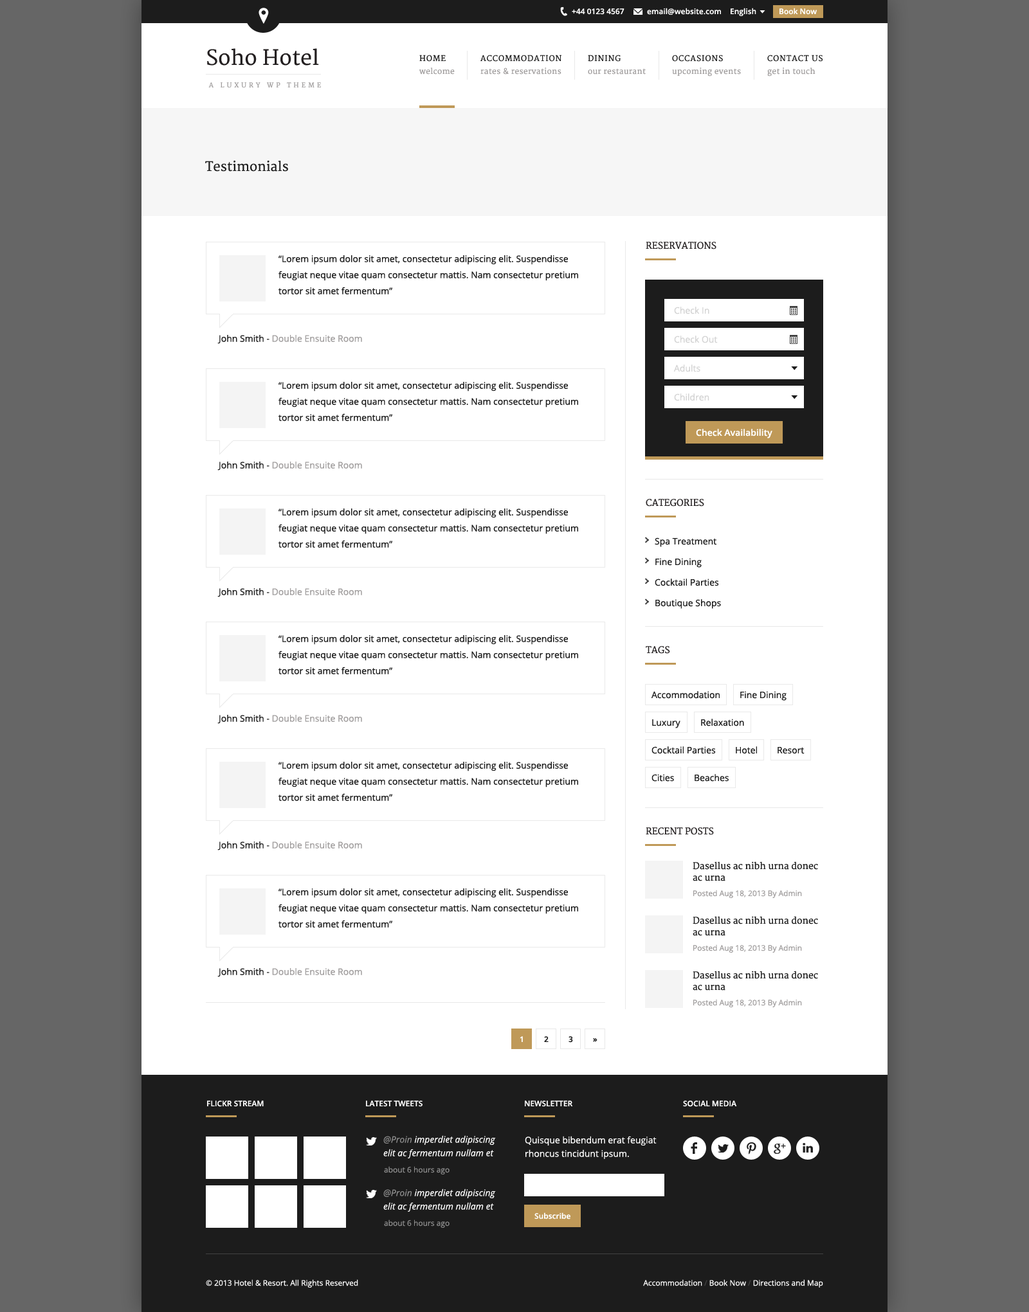
<style>
.page{position:relative;width:1029px;height:1312px;background:#ffffff}
.page>*{position:absolute;margin:0}
.t1{font:7.7px "OpenSans-Semibold";color:#ffffff}
.t2{font:20.6px "Merriweather";color:#231f20}
.t3{font:7.7px "Merriweather";letter-spacing:0.075em;color:#1c1c1c;text-transform:uppercase}
.t4{font:7.7px "Merriweather";letter-spacing:0.025em;color:#a09d9d}
.t5{font:6.4px "Merriweather";letter-spacing:0.4em;color:#a09d9d;text-transform:uppercase}
.t6{font:12.9px "Merriweather";color:#1c1c1c}
.t7{font:9px "Merriweather";color:#231f20;text-transform:uppercase}
.t8{font:9px/16.1px "OpenSans";color:#1c1c1c}
.t9{font:9px "OpenSans";color:#d3d3d3}
.t10{font:9px "OpenSans";color:#a09d9d}
.t11{font:9px "OpenSans";color:#1c1c1c}
.t12{font:9px "OpenSans-Semibold";color:#ffffff}
.t13{font:9px/11.6px "Merriweather";color:#1c1c1c}
.t14{font:7.7px "OpenSans";color:#a09d9d}
.t15{font:7.7px "OpenSans-Semibold";color:#1c1c1c}
.t16{font:7.7px "OpenSans-Semibold";color:#ffffff;text-transform:uppercase}
.t17{font:9px/13.5px "OpenSans-Italic";color:#ffffff}
.t18{font:9px/13.5px "OpenSans-Italic";color:#8b8b8b}
.t19{font:9px/13.5px "OpenSans";color:#ffffff}
.t20{font:7.7px "OpenSans";color:#8b8b8b}
.t21{font:7.7px "OpenSans";color:#ffffff}
.t22{font:7.7px "OpenSans";color:#424242}
</style>
<div class="page">
<p class="t1" style="left:572px;top:8px;width:52px;height:7px">+44 0123 4567</p>
<p class="t1" style="left:647px;top:8px;width:74px;height:7px">email@website.com</p>
<p class="t1" style="left:730px;top:8px;width:26px;height:8px">English</p>
<p class="t1" style="left:779px;top:8px;width:37px;height:7px">Book Now</p>
<p class="t2" style="left:207px;top:48px;width:112px;height:18px">Soho Hotel</p>
<p class="t3" style="left:419px;top:55px;width:27px;height:7px">Home</p>
<p class="t3" style="left:480px;top:55px;width:81px;height:7px">Accommodation</p>
<p class="t3" style="left:588px;top:55px;width:32px;height:7px">Dining</p>
<p class="t3" style="left:672px;top:55px;width:51px;height:7px">Occasions</p>
<p class="t3" style="left:767px;top:55px;width:55px;height:7px">Contact Us</p>
<p class="t4" style="left:419px;top:68px;width:36px;height:7px">welcome</p>
<p class="t4" style="left:480px;top:68px;width:81px;height:7px">rates &amp; reservations</p>
<p class="t4" style="left:588px;top:68px;width:57px;height:7px">our restaurant</p>
<p class="t4" style="left:672px;top:68px;width:69px;height:8px">upcoming events</p>
<p class="t4" style="left:767px;top:68px;width:48px;height:8px">get in touch</p>
<p class="t5" style="left:208px;top:82px;width:113px;height:6px">A Luxury WP Theme</p>
<p class="t6" style="left:205px;top:160px;width:83px;height:12px">Testimonials</p>
<p class="t7" style="left:645px;top:242px;width:71px;height:7px">Reservations</p>
<p class="t8" style="left:278px;top:255px;width:300px;height:39px">“Lorem ipsum dolor sit amet, consectetur adipiscing elit. Suspendisse feugiat neque vitae quam consectetur mattis. Nam consectetur pretium tortor sit amet fermentum”</p>
<p class="t9" style="left:674px;top:307px;width:35px;height:7px">Check In</p>
<p class="t10" style="left:217px;top:335px;width:145px;height:9px"><span class="t11">John Smith - </span>Double Ensuite Room</p>
<p class="t9" style="left:674px;top:336px;width:43px;height:7px">Check Out</p>
<p class="t9" style="left:673px;top:364px;width:27px;height:8px">Adults</p>
<p class="t8" style="left:278px;top:382px;width:300px;height:39px">“Lorem ipsum dolor sit amet, consectetur adipiscing elit. Suspendisse feugiat neque vitae quam consectetur mattis. Nam consectetur pretium tortor sit amet fermentum”</p>
<p class="t9" style="left:674px;top:393px;width:35px;height:8px">Children</p>
<p class="t12" style="left:696px;top:429px;width:76px;height:9px">Check Availability</p>
<p class="t10" style="left:217px;top:462px;width:145px;height:9px"><span class="t11">John Smith - </span>Double Ensuite Room</p>
<p class="t8" style="left:278px;top:509px;width:300px;height:39px">“Lorem ipsum dolor sit amet, consectetur adipiscing elit. Suspendisse feugiat neque vitae quam consectetur mattis. Nam consectetur pretium tortor sit amet fermentum”</p>
<p class="t7" style="left:645px;top:499px;width:59px;height:8px">Categories</p>
<p class="t11" style="left:654px;top:537px;width:62px;height:10px">Spa Treatment</p>
<p class="t11" style="left:655px;top:558px;width:46px;height:10px">Fine Dining</p>
<p class="t11" style="left:654px;top:579px;width:65px;height:7px">Cocktail Parties</p>
<p class="t10" style="left:217px;top:588px;width:145px;height:9px"><span class="t11">John Smith - </span>Double Ensuite Room</p>
<p class="t11" style="left:655px;top:599px;width:66px;height:10px">Boutique Shops</p>
<p class="t8" style="left:278px;top:635px;width:300px;height:39px">“Lorem ipsum dolor sit amet, consectetur adipiscing elit. Suspendisse feugiat neque vitae quam consectetur mattis. Nam consectetur pretium tortor sit amet fermentum”</p>
<p class="t7" style="left:645px;top:646px;width:25px;height:8px">Tags</p>
<p class="t11" style="left:651px;top:691px;width:68px;height:8px">Accommodation</p>
<p class="t11" style="left:740px;top:691px;width:46px;height:10px">Fine Dining</p>
<p class="t10" style="left:217px;top:715px;width:145px;height:9px"><span class="t11">John Smith - </span>Double Ensuite Room</p>
<p class="t11" style="left:652px;top:719px;width:28px;height:9px">Luxury</p>
<p class="t11" style="left:701px;top:719px;width:43px;height:7px">Relaxation</p>
<p class="t11" style="left:651px;top:746px;width:65px;height:8px">Cocktail Parties</p>
<p class="t11" style="left:735px;top:746px;width:22px;height:8px">Hotel</p>
<p class="t11" style="left:777px;top:747px;width:27px;height:7px">Resort</p>
<p class="t8" style="left:278px;top:762px;width:300px;height:39px">“Lorem ipsum dolor sit amet, consectetur adipiscing elit. Suspendisse feugiat neque vitae quam consectetur mattis. Nam consectetur pretium tortor sit amet fermentum”</p>
<p class="t11" style="left:651px;top:774px;width:23px;height:8px">Cities</p>
<p class="t11" style="left:694px;top:774px;width:34px;height:8px">Beaches</p>
<p class="t7" style="left:645px;top:827px;width:69px;height:8px">Recent Posts</p>
<p class="t10" style="left:217px;top:842px;width:145px;height:9px"><span class="t11">John Smith - </span>Double Ensuite Room</p>
<p class="t13" style="left:692px;top:861px;width:126px;height:20px">Dasellus ac nibh urna donec <br>ac urna</p>
<p class="t8" style="left:278px;top:888px;width:300px;height:40px">“Lorem ipsum dolor sit amet, consectetur adipiscing elit. Suspendisse feugiat neque vitae quam consectetur mattis. Nam consectetur pretium tortor sit amet fermentum”</p>
<p class="t14" style="left:693px;top:890px;width:109px;height:8px">Posted Aug 18, 2013 By Admin</p>
<p class="t13" style="left:692px;top:916px;width:126px;height:20px">Dasellus ac nibh urna donec <br>ac urna</p>
<p class="t14" style="left:693px;top:944px;width:109px;height:9px">Posted Aug 18, 2013 By Admin</p>
<p class="t10" style="left:217px;top:968px;width:145px;height:9px"><span class="t11">John Smith - </span>Double Ensuite Room</p>
<p class="t13" style="left:692px;top:971px;width:126px;height:20px">Dasellus ac nibh urna donec <br>ac urna</p>
<p class="t14" style="left:693px;top:999px;width:109px;height:8px">Posted Aug 18, 2013 By Admin</p>
<p class="t1" style="left:519px;top:1036px;width:4px;height:6px">1</p>
<p class="t15" style="left:544px;top:1036px;width:4px;height:6px">2</p>
<p class="t15" style="left:568px;top:1036px;width:5px;height:7px">3</p>
<p class="t15" style="left:593px;top:1038px;width:4px;height:4px">»</p>
<p class="t16" style="left:207px;top:1101px;width:57px;height:6px">Flickr Stream</p>
<p class="t16" style="left:366px;top:1101px;width:56px;height:6px">Latest Tweets</p>
<p class="t16" style="left:525px;top:1101px;width:48px;height:6px">Newsletter</p>
<p class="t16" style="left:683px;top:1101px;width:54px;height:6px">Social Media</p>
<p class="t17" style="left:383px;top:1135px;width:113px;height:23px"><span class="t18">@Proin </span>imperdiet adipiscing elit ac fermentum nullam et</p>
<p class="t19" style="left:525px;top:1136px;width:131px;height:23px">Quisque bibendum erat feugiat rhoncus tincidunt ipsum.</p>
<p class="t20" style="left:384px;top:1166px;width:65px;height:8px">about 6 hours ago</p>
<p class="t17" style="left:383px;top:1189px;width:113px;height:23px"><span class="t18">@Proin</span> imperdiet adipiscing elit ac fermentum nullam et</p>
<p class="t1" style="left:534px;top:1212px;width:36px;height:8px">Subscribe</p>
<p class="t20" style="left:384px;top:1220px;width:65px;height:8px">about 6 hours ago</p>
<p class="t21" style="left:206px;top:1279px;width:152px;height:9px">© 2013 Hotel &amp; Resort. All Rights Reserved</p>
<p class="t21" style="left:643px;top:1279px;width:180px;height:9px">Accommodation <span class="t22">/</span> Book Now <span class="t22">/</span> Directions and Map</p>
</div>
